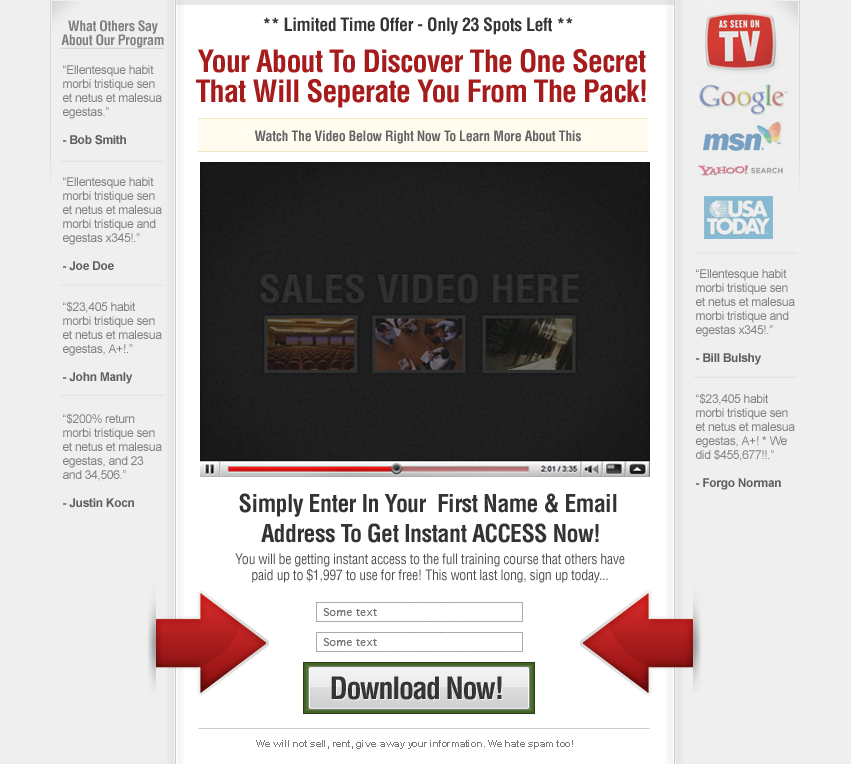
<style>
.page{position:relative;width:851px;height:764px;background:#efefef}
.page>*{position:absolute;margin:0}
.t1{font:18px "Helvetica-Condensed-Bold";letter-spacing:-0.025em;color:#353535}
.t2{font:14px/14px "Helvetica-Condensed-Bold";letter-spacing:-0.025em;color:#7f7f7f}
.t3{font:30px/30px "Helvetica-Condensed-Bold";letter-spacing:-0.025em;color:#a61b1b}
.t4{font:12px/14px "ArialMT";letter-spacing:-0.025em}
.t5{font:12px/14px "Arial-BoldMT";letter-spacing:-0.025em}
.t6{font:14px "Helvetica-Condensed-Bold";letter-spacing:-0.025em;color:#636363}
.t7{font:12px/14px "ArialMT";letter-spacing:-0.025em;color:#7f7f7f}
.t8{font:12px/14px "Arial-BoldMT";letter-spacing:-0.025em;color:#7f7f7f}
.t9{font:24px/30px "Helvetica-Condensed-Bold";letter-spacing:-0.025em;color:#333333}
.t10{font:14px/16px "Helvetica-Condensed";letter-spacing:-0.025em;color:#4d4d4d}
.t11{font:30px "Helvetica-Condensed-Bold";letter-spacing:-0.05em;color:#353535}
.t12{font:10px "Arial-BoldMT";letter-spacing:-0.025em;color:#7a7a7a}
</style>
<div class="page">
<p class="t1" style="left:263px;top:17px;width:310px;height:18px">** Limited Time Offer - Only 23 Spots Left **</p>
<p class="t2" style="left:61px;top:20px;width:103px;height:28px;text-align:center">What Others Say<br>About Our Program</p>
<p class="t3" style="left:196px;top:49px;width:450px;height:59px;text-align:center">Your About To Discover The One Secret<br>That Will Seperate You From The Pack!</p>
<p class="t4" style="left:63px;top:65px;width:99px;height:80px">“Ellentesque habit<br>morbi tristique sen<br>et netus et malesua<br>egestas.”<br><br><span class="t5">- Bob Smith</span></p>
<p class="t6" style="left:254px;top:130px;width:327px;height:14px">Watch The Video Below Right Now To Learn More About This</p>
<p class="t7" style="left:63px;top:177px;width:99px;height:94px">“Ellentesque habit<br>morbi tristique sen<br>et netus et malesua<br>morbi tristique and<br>egestas x345!.”<br><br><span class="t8">- Joe Doe</span></p>
<p class="t4" style="left:696px;top:269px;width:99px;height:96px">“Ellentesque habit<br>morbi tristique sen<br>et netus et malesua<br>morbi tristique and<br>egestas x345!.”<br><br><span class="t5">- Bill Bulshy</span></p>
<p class="t4" style="left:63px;top:301px;width:99px;height:83px">“$23,405 habit<br>morbi tristique sen<br>et netus et malesua<br>egestas, A+!.”<br><br><span class="t5">- John Manly</span></p>
<p class="t4" style="left:696px;top:393px;width:99px;height:97px">“$23,405 habit<br>morbi tristique sen<br>et netus et malesua<br>egestas, A+! * We<br>did $455,677!!.”<br><br><span class="t5">- Forgo Norman</span></p>
<p class="t4" style="left:63px;top:413px;width:99px;height:95px">“$200% return<br>morbi tristique sen<br>et netus et malesua<br>egestas, and 23 <br>and 34,506.”<br><br><span class="t5">- Justin Kocn</span></p>
<p class="t9" style="left:239px;top:493px;width:378px;height:50px;text-align:center">Simply Enter In Your  First Name &amp; Email <br>Address To Get Instant ACCESS Now!</p>
<p class="t10" style="left:235px;top:553px;width:390px;height:30px;text-align:center">You will be getting instant access to the full training course that others have<br>paid up to $1,997 to use for free! This wont last long, sign up today...</p>
<p class="t11" style="left:331px;top:676px;width:171px;height:24px">Download Now!</p>
<p class="t12" style="left:256px;top:740px;width:317px;height:9px">We will not sell, rent, give away your information. We hate spam too!</p>
</div>
